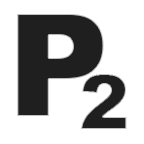
<style>
.page{position:relative;width:144px;height:144px;background:#ffffff}
.page>*{position:absolute;margin:0}
.t1{font:141.8px "Arial-Black";letter-spacing:-0.22em;color:#1f1f1f}
.t2{font:75.6px "Arial-Black";letter-spacing:-0.14em;color:#1f1f1f}
</style>
<div class="page">
<p class="t1" style="left:17px;top:14px;width:110px;height:115px">P<span class="t2">2</span></p>
</div>
